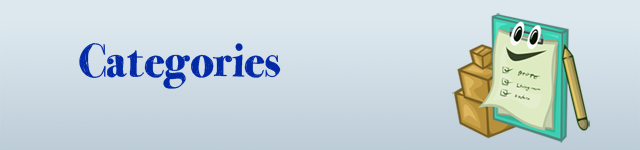
<style>
.page{position:relative;width:640px;height:150px}
.page>*{position:absolute;margin:0}
.t1{font:47.2px "MomsDiner";color:#0229a6}
</style>
<div class="page">
<p class="t1" style="left:79px;top:43px;width:202px;height:46px">Categories</p>
</div>
